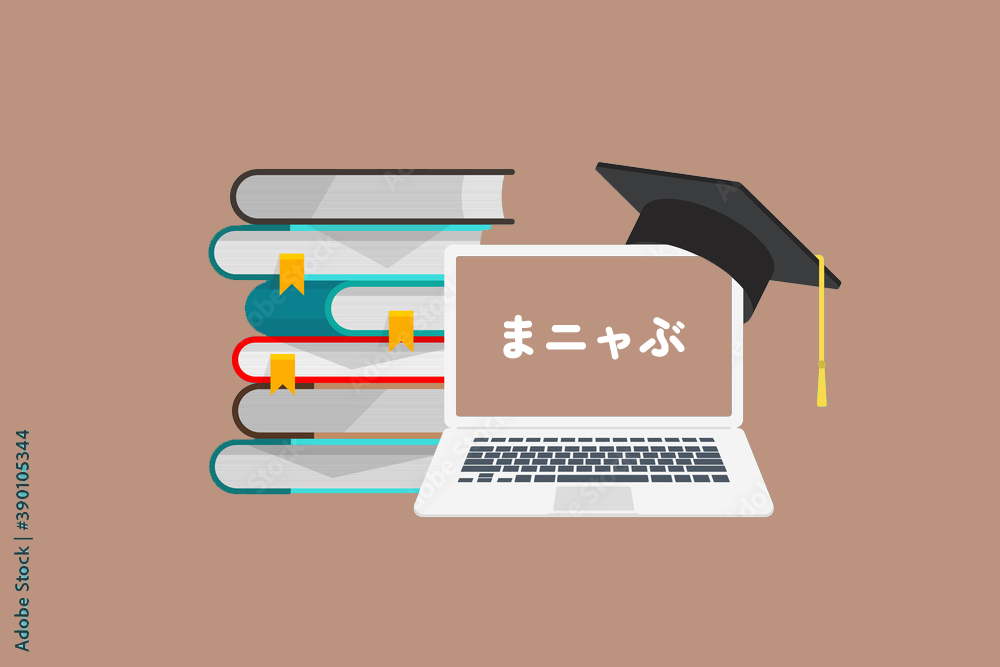
<style>
.page{position:relative;width:1000px;height:667px;background:#bb937f}
.page>*{position:absolute;margin:0}
.t1{font:48px "ZenMaruGothic-Black";color:#ffffff}
</style>
<div class="page">
<p class="t1" style="left:503px;top:314px;width:182px;height:46px">まニャぶ</p>
</div>
